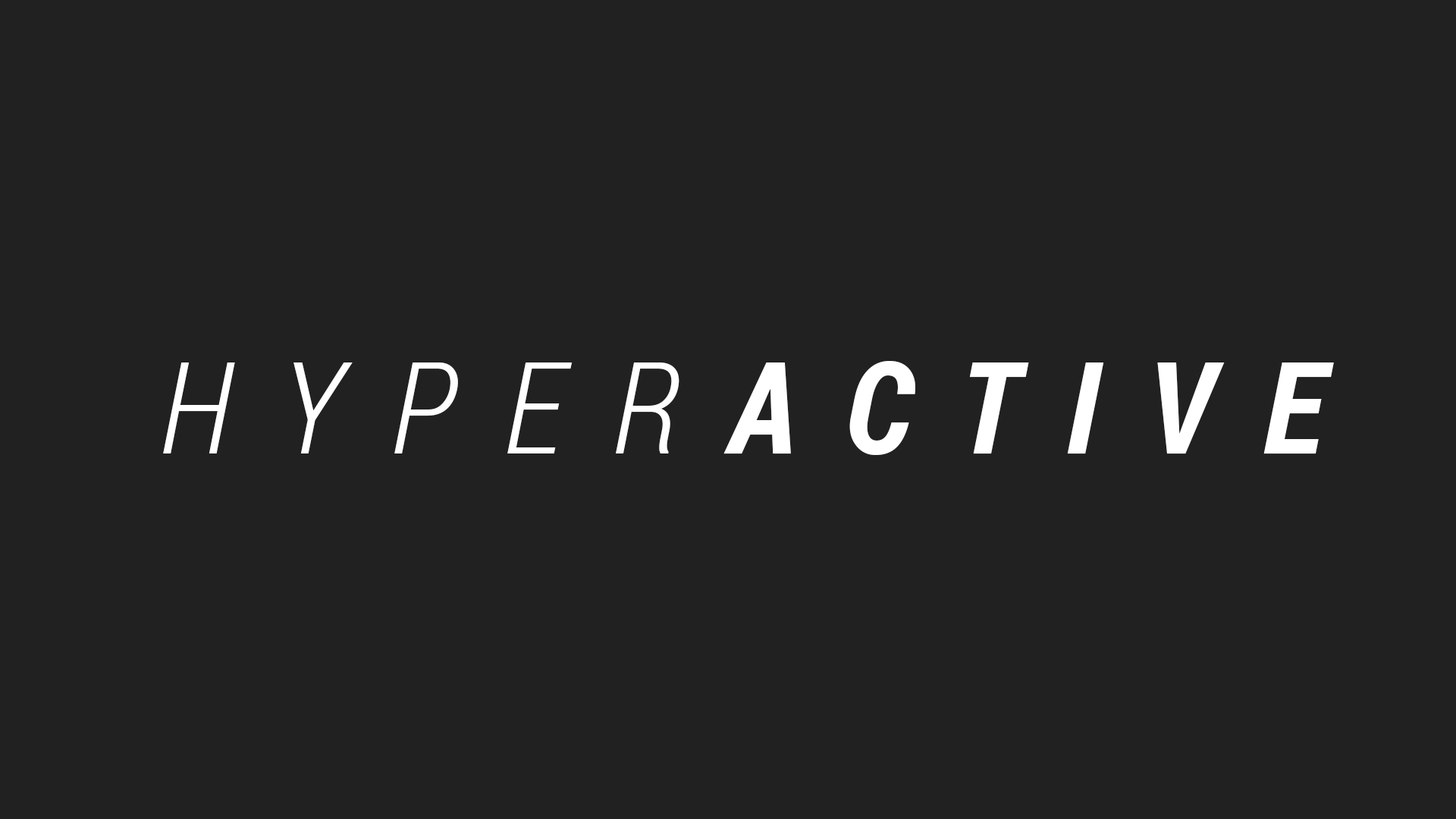
<style>
.page{position:relative;width:1456px;height:819px;background:#212121}
.page>*{position:absolute;margin:0}
.t1{font:128.2px "RobotoCondensed-BoldItalic";letter-spacing:0.375em;color:#ffffff}
.t2{font:128.2px "RobotoCondensed-LightItalic";letter-spacing:0.375em;color:#ffffff}
</style>
<div class="page">
<p class="t1" style="left:163px;top:361px;width:1171px;height:94px"><span class="t2">HYPER</span>ACTIVE</p>
</div>
